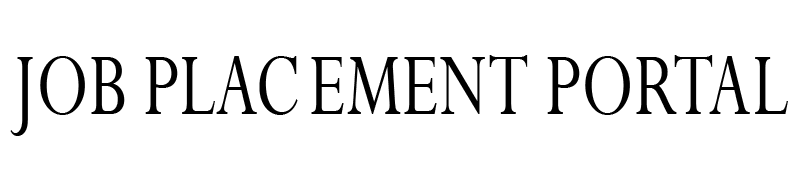
<style>
.page{position:relative;width:800px;height:173px;background:#ffffff}
.page>*{position:absolute;margin:0}
.t1{font:100.3px "Perpetua";color:#000000;scale:0.73 1}
</style>
<div class="page">
<p class="t1" style="left:10px;top:55px;width:778px;height:81px">JOB PLAC EMENT PORTAL</p>
</div>
